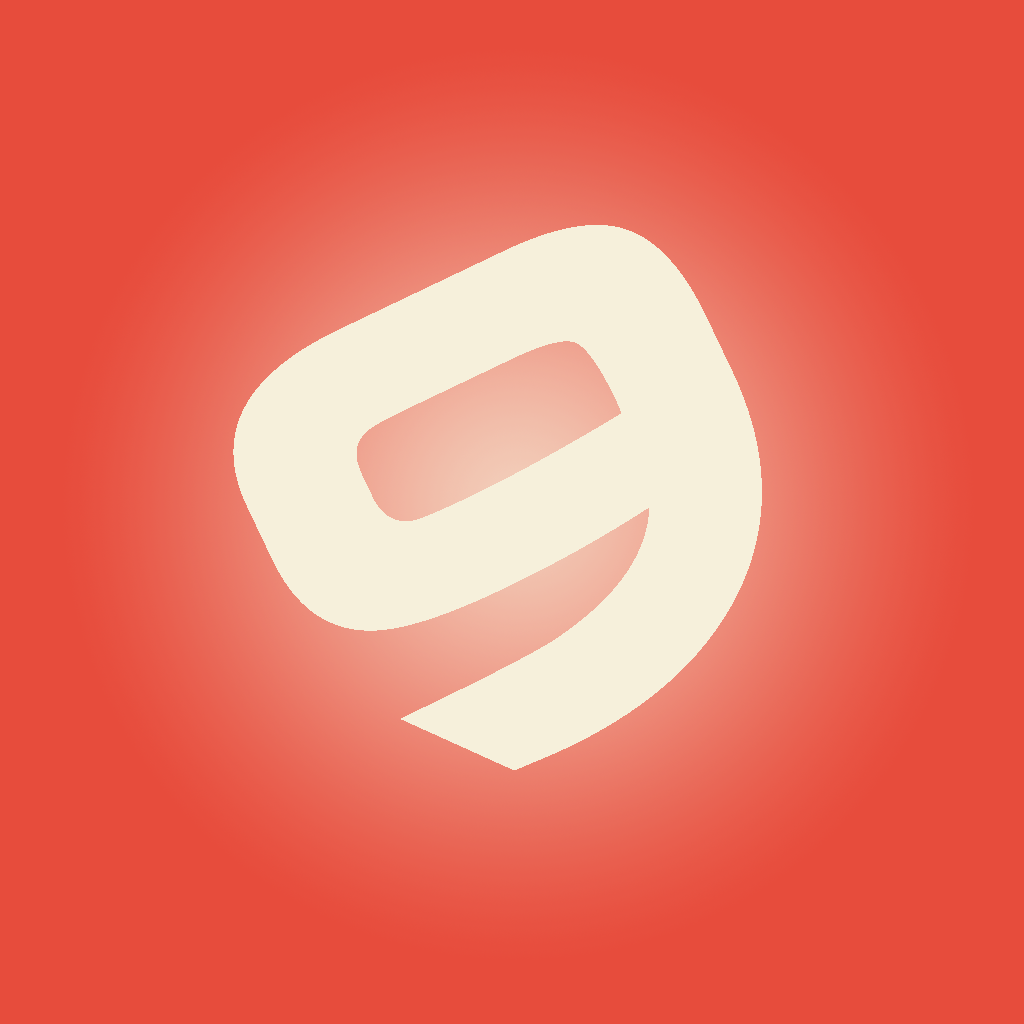
<style>
.page{position:relative;width:1024px;height:1024px;background:#e74c3c}
.page>*{position:absolute;margin:0}
.t1{font:841.7px "FortisSCapsSSiBold";letter-spacing:0.015em;color:#f6f0db}
</style>
<div class="page">
<p class="t1" style="left:233px;top:225px;width:529px;height:545px;rotate:-25deg">9</p>
</div>
